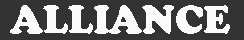
<style>
.page{position:relative;width:244px;height:40px;background:#333333}
.page>*{position:absolute;margin:0}
.t1{font:38px "CooperBlackStd";color:#fafcfa}
</style>
<div class="page">
<p class="t1" style="left:10px;top:5px;width:220px;height:29px">ALLIANCE</p>
</div>
